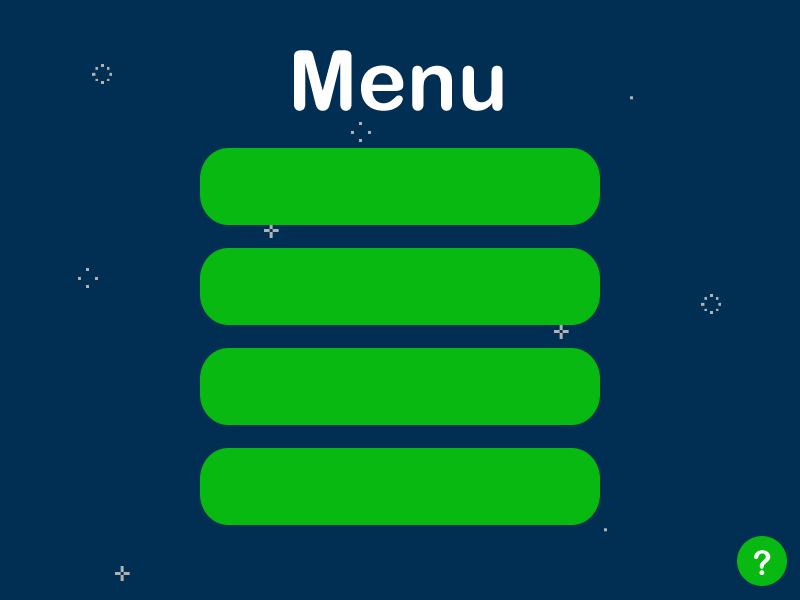
<style>
.page{position:relative;width:800px;height:600px;background:#012f54}
.page>*{position:absolute;margin:0}
.t1{font:83.3px "ArialRoundedMTBold";color:#fefefe}
.t2{font:33.3px "ArialRoundedMTBold";color:#ffffff}
</style>
<div class="page">
<p class="t1" style="left:294px;top:50px;width:209px;height:61px">Menu</p>
<p class="t2" style="left:754px;top:550px;width:17px;height:25px">?</p>
</div>
